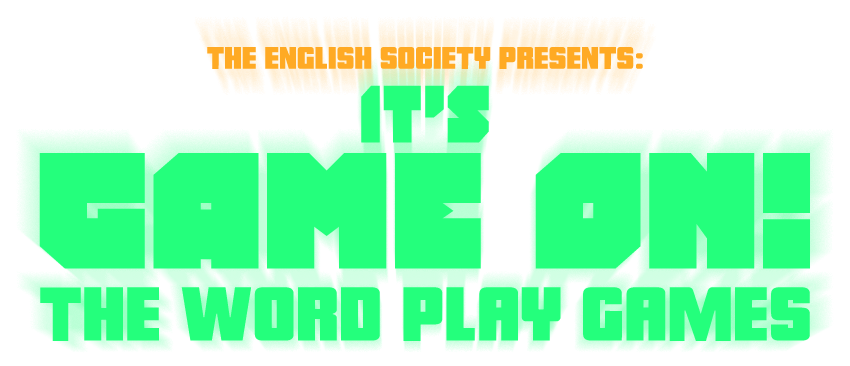
<style>
.page{position:relative;width:850px;height:366px;background:#ffffff}
.page>*{position:absolute;margin:0}
.t1{font:34.6px "Porcine-Heavy";letter-spacing:0.003em;color:#ffaa24}
.t2{font:84.7px "TurtleModeCondensed";letter-spacing:0.003em;color:#24ff7c}
.t3{font:172.3px "TurtleMode";color:#24ff7c}
.t4{font:84.7px "Porcine-Heavy";letter-spacing:0.003em;color:#24ff7c}
</style>
<div class="page">
<p class="t1" style="left:207px;top:47px;width:436px;height:22px">THE ENGLISH SOCIETY PRESENTS:</p>
<p class="t2" style="left:361px;top:85px;width:128px;height:58px">IT'S</p>
<p class="t3" style="left:39px;top:153px;width:771px;height:116px">GAME ON!</p>
<p class="t4" style="left:40px;top:287px;width:770px;height:54px">THE WORD PLAY GAMES</p>
</div>
